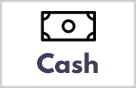
<style>
.page{position:relative;width:136px;height:88px;background:#ffffff}
.page>*{position:absolute;margin:0}
.t1{font:24px "LeagueSpartan-Bold";color:#3c405b}
</style>
<div class="page">
<p class="t1" style="left:37px;top:52px;width:61px;height:22px">Cash</p>
</div>
